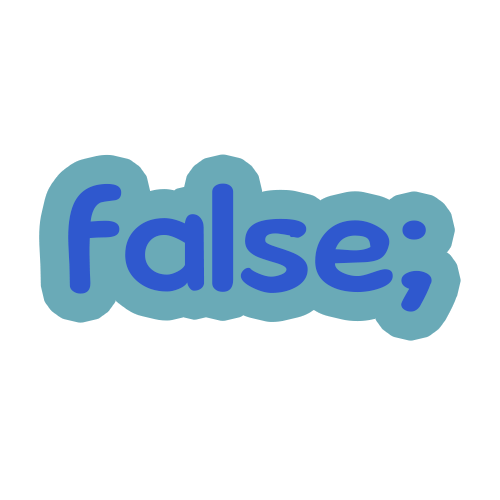
<style>
.page{position:relative;width:500px;height:500px;background:#ffffff}
.page>*{position:absolute;margin:0}
.t1{font:134.5px "Kronika";color:#2f58ce;scale:1.05 1}
</style>
<div class="page">
<p class="t1" style="left:68px;top:183px;width:364px;height:129px">false;</p>
</div>
